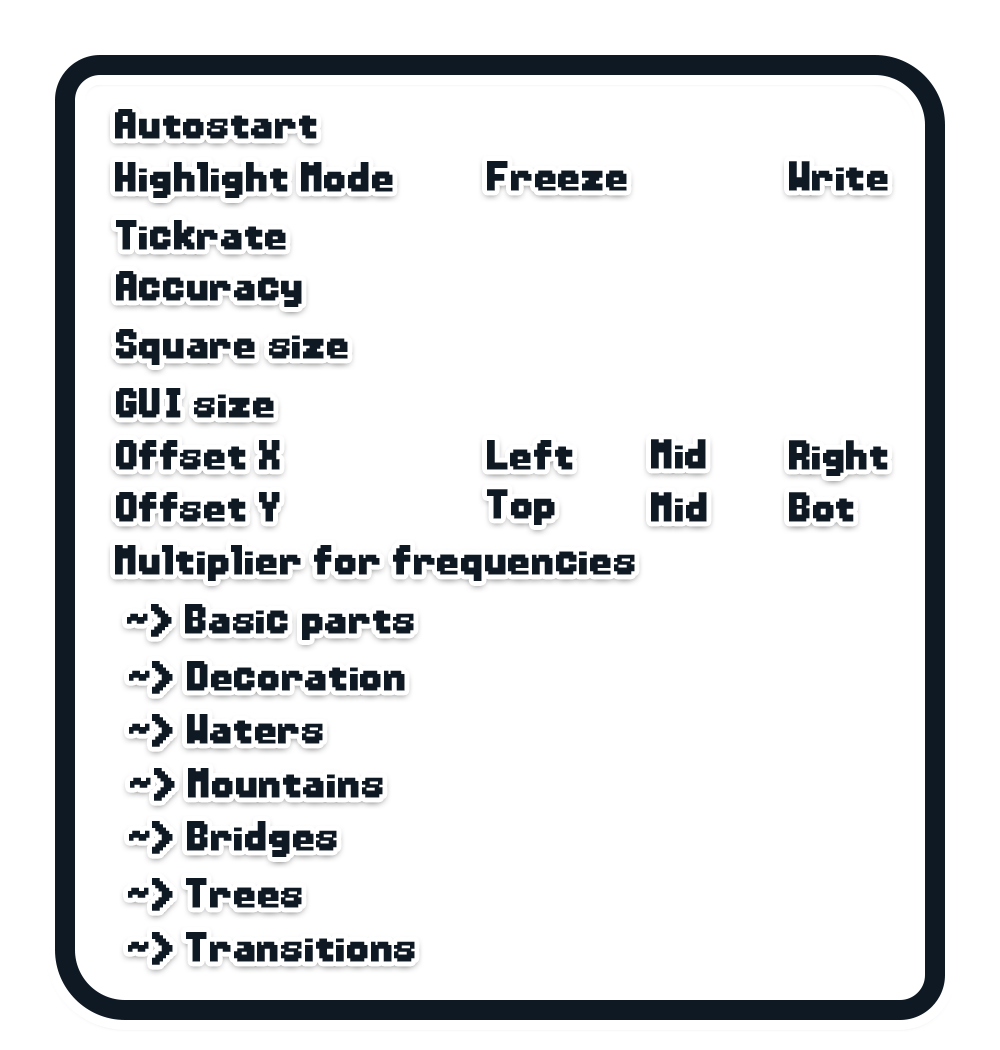
<style>
.page{position:relative;width:1000px;height:1050px;background:#ffffff}
.page>*{position:absolute;margin:0}
.t1{font:42.1px "PowerClearBold";color:#0f1923;font-weight:bold}
.t2{font:41.7px "PowerClearBold";color:#0f1923;font-weight:bold}
</style>
<div class="page">
<p class="t1" style="left:115px;top:109px;width:202px;height:30px">Autostart</p>
<p class="t1" style="left:487px;top:161px;width:140px;height:30px">Freeze</p>
<p class="t2" style="left:789px;top:161px;width:99px;height:30px">Write</p>
<p class="t1" style="left:115px;top:162px;width:278px;height:36px">Highlight Mode</p>
<p class="t1" style="left:116px;top:220px;width:170px;height:30px">Tickrate</p>
<p class="t1" style="left:116px;top:271px;width:186px;height:36px">Accuracy</p>
<p class="t1" style="left:116px;top:329px;width:232px;height:36px">Square size</p>
<p class="t1" style="left:116px;top:388px;width:158px;height:30px">GUI size</p>
<p class="t1" style="left:116px;top:440px;width:164px;height:30px">Offset X</p>
<p class="t1" style="left:487px;top:440px;width:86px;height:30px">Left</p>
<p class="t2" style="left:651px;top:439px;width:55px;height:30px">Mid</p>
<p class="t2" style="left:789px;top:440px;width:99px;height:36px">Right</p>
<p class="t1" style="left:116px;top:492px;width:164px;height:30px">Offset Y</p>
<p class="t2" style="left:487px;top:489px;width:68px;height:36px">Top</p>
<p class="t2" style="left:651px;top:492px;width:56px;height:30px">Mid</p>
<p class="t2" style="left:789px;top:492px;width:65px;height:30px">Bot</p>
<p class="t1" style="left:115px;top:545px;width:520px;height:36px">Multiplier for frequencies</p>
<p class="t1" style="left:127px;top:604px;width:287px;height:36px">~&gt; Basic parts</p>
<p class="t1" style="left:129px;top:661px;width:276px;height:33px">~&gt; Decoration</p>
<p class="t1" style="left:129px;top:714px;width:194px;height:33px">~&gt; Waters</p>
<p class="t1" style="left:130px;top:768px;width:253px;height:33px">~&gt; Mountains</p>
<p class="t1" style="left:129px;top:821px;width:208px;height:36px">~&gt; Bridges</p>
<p class="t1" style="left:128px;top:878px;width:174px;height:33px">~&gt; Trees</p>
<p class="t1" style="left:128px;top:932px;width:287px;height:33px">~&gt; Transitions</p>
</div>
